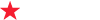
<style>
.page{position:relative;width:100px;height:20px;background:#ffffff}
.page>*{position:absolute;margin:0}
.t1{font:24px "NanumGothic";color:#f51d30}
</style>
<div class="page">
<p class="t1" style="left:0px;top:1px;width:20px;height:19px">★</p>
</div>
